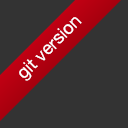
<style>
.page{position:relative;width:128px;height:128px;background:#333333}
.page>*{position:absolute;margin:0}
.t1{font:18px "HelveticaNeue";color:#ffffff}
</style>
<div class="page">
<p class="t1" style="left:19px;top:17px;width:63px;height:64px;rotate:-45deg">git version</p>
</div>
